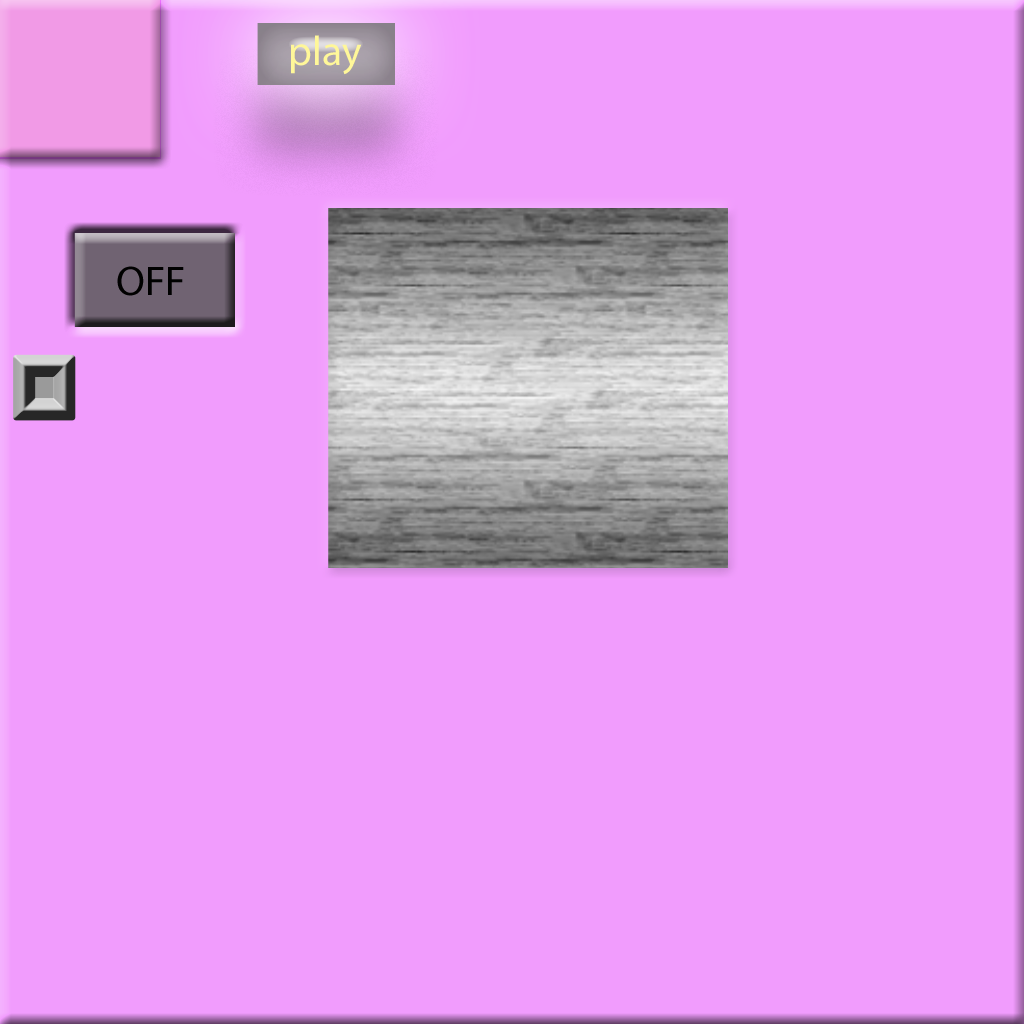
<style>
.page{position:relative;width:1024px;height:1024px;background:#f19cfd}
.page>*{position:absolute;margin:0}
.t1{font:41.7px "MyriadPro-Regular";color:#fff799}
.t2{font:41.7px "MyriadPro-Regular";color:#000000}
</style>
<div class="page">
<p class="t1" style="left:290px;top:35px;width:72px;height:40px">play</p>
<p class="t2" style="left:117px;top:266px;width:67px;height:30px">OFF</p>
</div>
